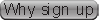
<style>
.page{position:relative;width:99px;height:20px}
.page>*{position:absolute;margin:0}
.t1{font:15.8px "ArialMT";color:#231f20}
</style>
<div class="page">
<p class="t1" style="left:4px;top:3px;width:89px;height:15px">Why sign up</p>
</div>
